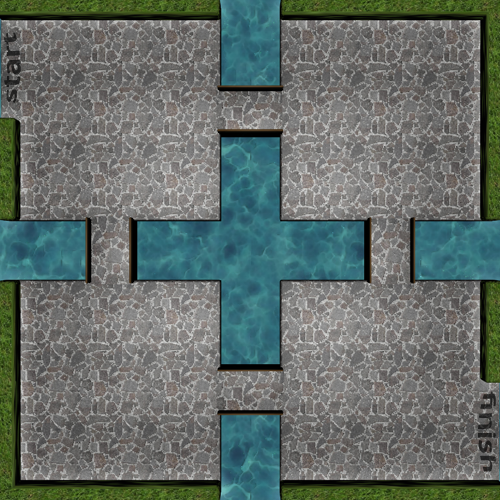
<style>
.page{position:relative;width:500px;height:500px}
.page>*{position:absolute;margin:0}
.t1{font:22px "MyriadPro-Semibold";color:#232323;scale:1.4 1}
.t2{font:19.8px "MyriadPro-Semibold";color:#252424;scale:1.56 1}
</style>
<div class="page">
<p class="t1" style="left:4px;top:32px;width:17px;height:72px;rotate:-90deg">start</p>
<p class="t2" style="left:478px;top:391px;width:18px;height:81px;rotate:90deg">finish</p>
</div>
